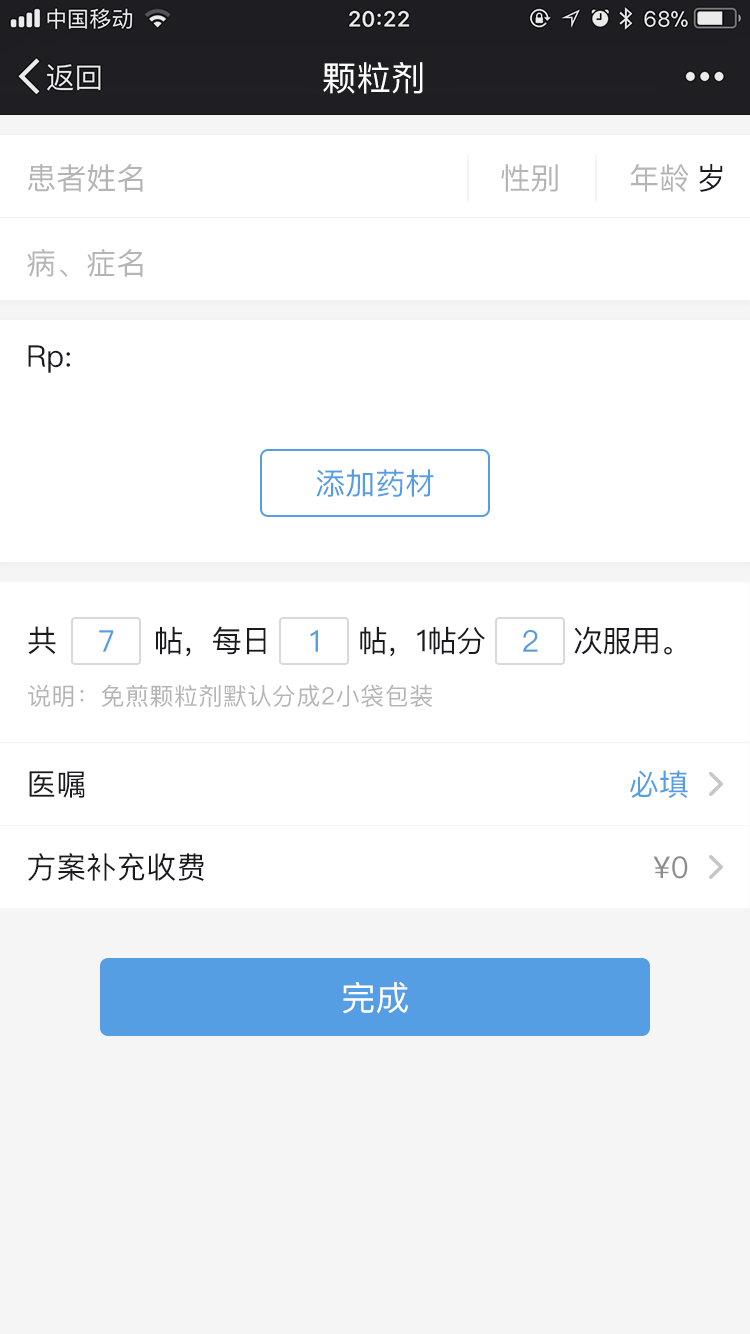
<style>
.page{position:relative;width:750px;height:1334px;background:#ffffff}
.page>*{position:absolute;margin:0}
.t1{font:34px "PingFangSC-Regular";letter-spacing:0.02em;color:#ffffff}
.t2{font:30px "PingFangSC-Regular";color:#b6b5b5}
.t3{font:30px "PingFangSC-Regular";color:#1b1b1f}
.t4{font:30px "PingFangSC-Regular";color:#569ee3}
.t5{font:30px "PingFangSC-Regular";letter-spacing:-0.02em;color:#1b1b1f}
.t6{font:24px "PingFangSC-Regular";letter-spacing:0.02em;color:#b6b5b5}
.t7{font:30px "PingFangSC-Regular";color:#8d8d8d}
.t8{font:34px "PingFangSC-Regular";color:#ffffff}
</style>
<div class="page">
<p class="t1" style="left:323px;top:62px;width:100px;height:32px">颗粒剂</p>
<p class="t2" style="left:27px;top:164px;width:116px;height:28px">患者姓名</p>
<p class="t2" style="left:501px;top:164px;width:57px;height:28px">性别</p>
<p class="t2" style="left:630px;top:164px;width:59px;height:28px">年龄</p>
<p class="t3" style="left:699px;top:164px;width:24px;height:28px">岁</p>
<p class="t2" style="left:27px;top:249px;width:116px;height:28px">病、症名</p>
<p class="t3" style="left:28px;top:345px;width:42px;height:28px">Rp:</p>
<p class="t4" style="left:316px;top:469px;width:118px;height:28px">添加药材</p>
<p class="t5" style="left:28px;top:626px;width:644px;height:31px">共          帖，每日         帖，1帖分         次服用。</p>
<p class="t4" style="left:99px;top:630px;width:15px;height:22px">7</p>
<p class="t4" style="left:310px;top:630px;width:8px;height:22px">1</p>
<p class="t4" style="left:523px;top:630px;width:15px;height:22px">2</p>
<p class="t6" style="left:28px;top:684px;width:404px;height:24px">说明：免煎颗粒剂默认分成2小袋包装</p>
<p class="t3" style="left:29px;top:771px;width:56px;height:27px">医嘱</p>
<p class="t4" style="left:630px;top:770px;width:58px;height:28px">必填</p>
<p class="t3" style="left:28px;top:853px;width:176px;height:28px">方案补充收费</p>
<p class="t7" style="left:653px;top:856px;width:35px;height:23px">¥0</p>
<p class="t8" style="left:343px;top:981px;width:65px;height:33px">完成</p>
</div>
